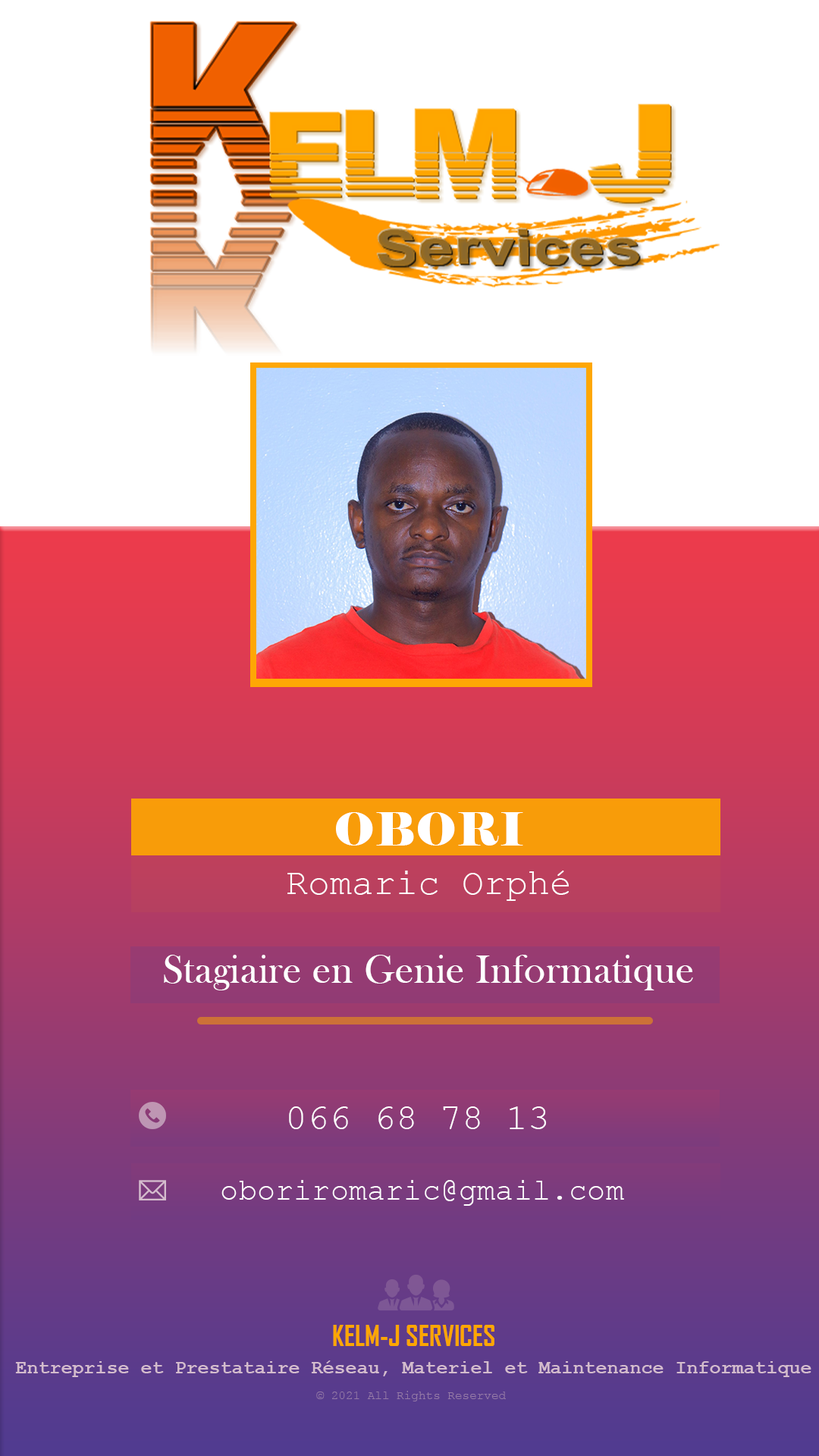
<style>
.page{position:relative;width:819px;height:1456px;background:#ffffff}
.page>*{position:absolute;margin:0}
.t1{font:45.5px "Elephant-Regular";letter-spacing:0.01em;color:#ffffff}
.t2{font:36.4px "CourierNewPSMT";letter-spacing:0.005em;color:#ffffff}
.t3{font:40.9px "BaskOldFace";letter-spacing:0.01em;color:#ffffff}
.t4{font:30.3px "CourierNewPSMT";letter-spacing:0.005em;color:#ffffff}
.t5{font:27.3px "AgencyFB-Bold";color:#fea600}
.t6{font:19px "CourierNewPS-BoldMT";color:#ebbfdf}
.t7{font:12.1px "CourierNewPSMT";color:#957aa7}
</style>
<div class="page">
<p class="t1" style="left:336px;top:812px;width:187px;height:34px">OBORI</p>
<p class="t2" style="left:287px;top:871px;width:282px;height:30px">Romaric Orphé</p>
<p class="t3" style="left:164px;top:955px;width:529px;height:35px">Stagiaire en Genie Informatique</p>
<p class="t2" style="left:289px;top:1106px;width:258px;height:23px">066 68 78 13</p>
<p class="t4" style="left:221px;top:1180px;width:403px;height:26px">oboriromaric@gmail.com</p>
<p class="t5" style="left:333px;top:1325px;width:161px;height:21px">KELM-J SERVICES</p>
<p class="t6" style="left:15px;top:1360px;width:796px;height:17px">Entreprise et Prestataire Réseau, Materiel et Maintenance Informatique</p>
<p class="t7" style="left:316px;top:1391px;width:190px;height:10px">© 2021 All Rights Reserved</p>
</div>
